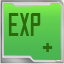
<style>
.page{position:relative;width:64px;height:64px}
.page>*{position:absolute;margin:0}
.t1{font:28px "SAOWelcomeTT-Regular";color:#2d6a0c;scale:0.95 1}
</style>
<div class="page">
<p class="t1" style="left:8px;top:13px;width:33px;height:23px">EXP</p>
<p class="t1" style="left:42px;top:43px;width:11px;height:9px">+</p>
</div>
